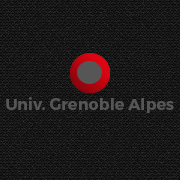
<style>
.page{position:relative;width:180px;height:180px}
.page>*{position:absolute;margin:0}
.t1{font:16px "Montserrat-Bold";color:#575657}
</style>
<div class="page">
<p class="t1" style="left:6px;top:97px;width:168px;height:16px">Univ. Grenoble Alpes</p>
</div>
